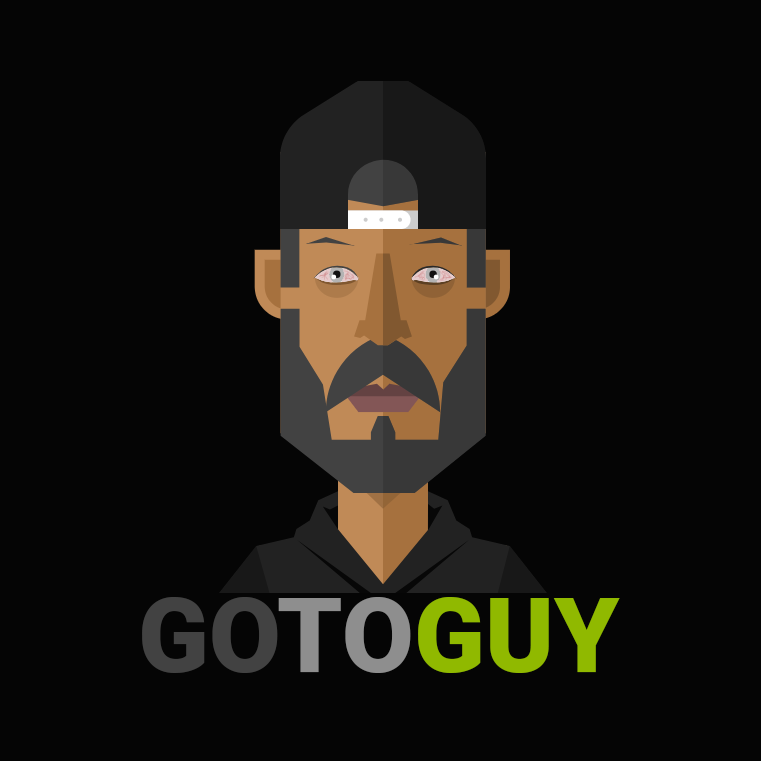
<style>
.page{position:relative;width:761px;height:761px;background:#050505}
.page>*{position:absolute;margin:0}
.t1{font:104.4px "Roboto-Black";color:#90b900}
.t2{font:104.4px "Roboto-Black";color:#424242}
.t3{font:104.4px "Roboto-Black";color:#8e8e8e}
</style>
<div class="page">
<p class="t1" style="left:142px;top:597px;width:478px;height:76px"><span class="t2">GO</span><span class="t3">TO</span>GUY</p>
</div>
